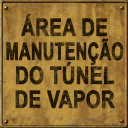
<style>
.page{position:relative;width:128px;height:128px}
.page>*{position:absolute;margin:0}
.t1{font:24px/24px "Arial-BoldMT";color:#2a1e08;text-transform:uppercase;font-weight:bold;scale:0.78 1}
.t2{font:24px/24px "Arial-BoldMT";color:#2a1e08;text-transform:uppercase;font-weight:bold;scale:0.66 1}
</style>
<div class="page">
<p class="t1" style="left:6px;top:13px;width:118px;height:96px;text-align:center">Área de<br><span class="t2">manutenção<br></span>do túnel<br>de vapor</p>
</div>
